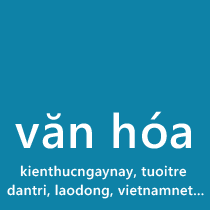
<style>
.page{position:relative;width:210px;height:210px;background:#0e82a7}
.page>*{position:absolute;margin:0}
.t1{font:48px "SegoeWP-Semibold";letter-spacing:0.025em;color:#ffffff}
.t2{font:14px "SegoeWP-Semibold";letter-spacing:0.025em;color:#fefefe}
.t3{font:14px "SegoeWP-Semibold";letter-spacing:0.025em;color:#ffffff}
</style>
<div class="page">
<p class="t1" style="left:15px;top:111px;width:176px;height:38px">văn hóa</p>
<p class="t2" style="left:20px;top:165px;width:167px;height:15px">kienthucngaynay, tuoitre</p>
<p class="t3" style="left:7px;top:184px;width:197px;height:15px">dantri, laodong, vietnamnet...</p>
</div>
